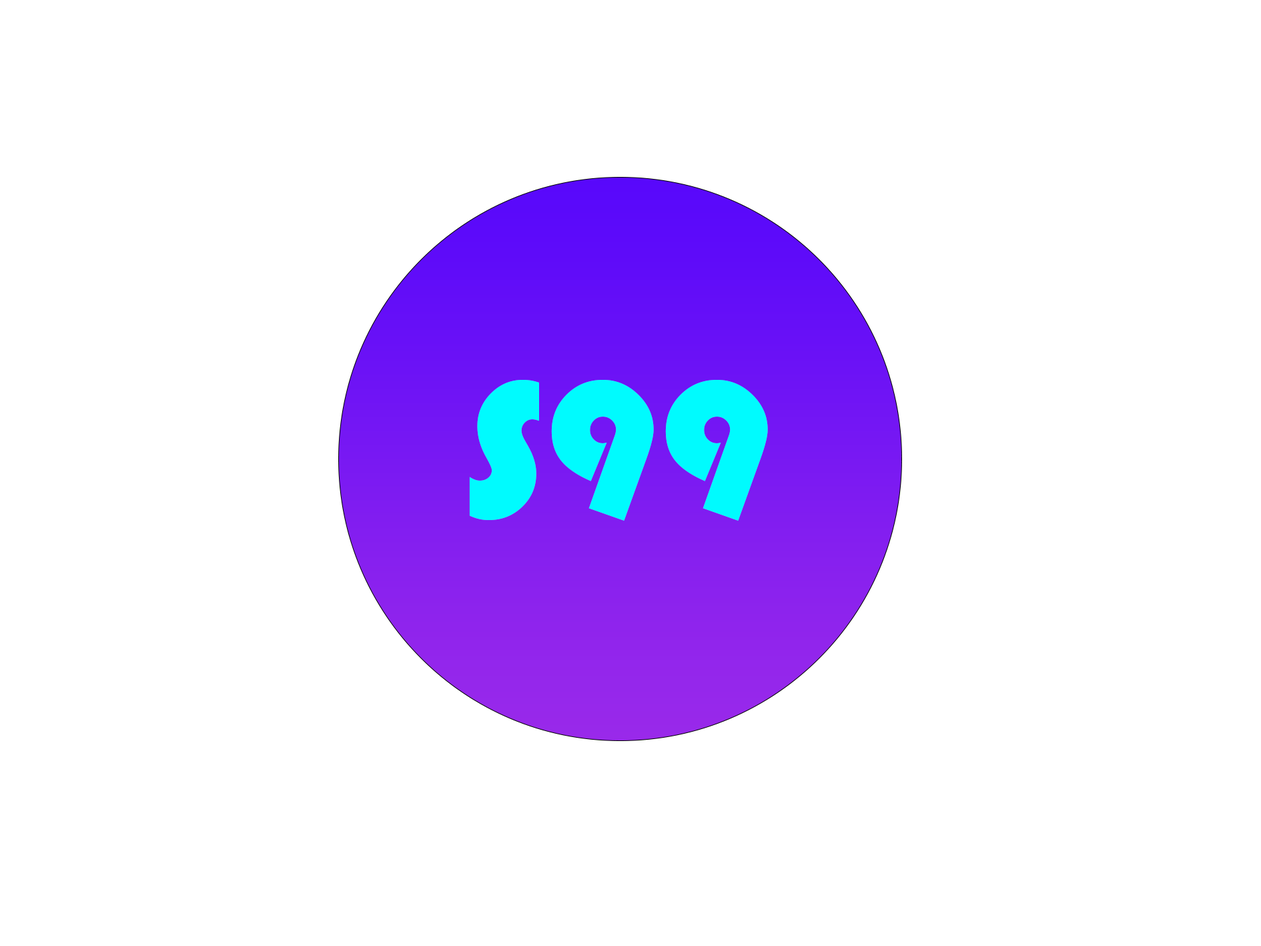
<style>
.page{position:relative;width:1261px;height:946px;background:#ffffff}
.page>*{position:absolute;margin:0}
.t1{font:200.2px "Bauhaus93";color:#00fbfe}
</style>
<div class="page">
<p class="t1" style="left:469px;top:380px;width:299px;height:140px">S99</p>
</div>
